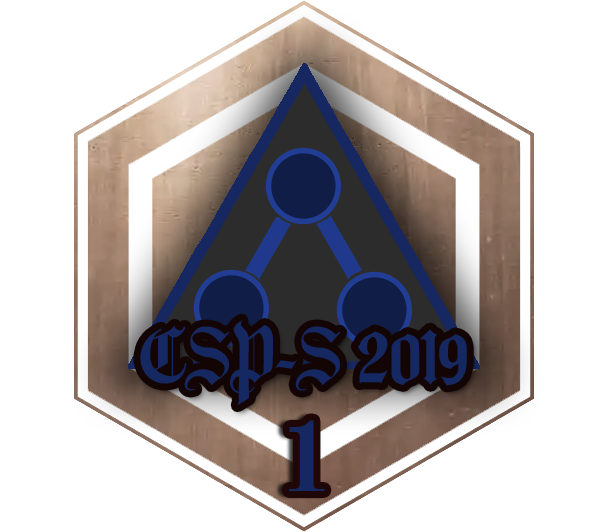
<style>
.page{position:relative;width:608px;height:532px;background:#ffffff}
.page>*{position:absolute;margin:0}
.t1{font:80px "REEJIStar-LiLing-Gothic-GB";letter-spacing:-0.05em;color:#162861}
.t2{font:100px "HYa4gj";letter-spacing:-0.05em;color:#162861}
</style>
<div class="page">
<p class="t1" style="left:140px;top:320px;width:327px;height:86px">CSP-S 2019</p>
<p class="t2" style="left:289px;top:420px;width:36px;height:71px">1</p>
</div>
